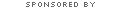
<style>
.page{position:relative;width:120px;height:10px;background:#ffffff}
.page>*{position:absolute;margin:0}
.t1{font:8px "Silkscreen";color:#666666}
</style>
<div class="page">
<p class="t1" style="left:26px;top:2px;width:69px;height:5px">Sponsored By</p>
</div>
